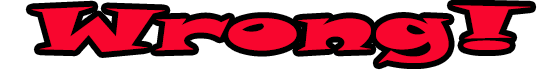
<style>
.page{position:relative;width:559px;height:78px;background:#ffffff}
.page>*{position:absolute;margin:0}
.t1{font:60px "SnapITC-Regular";color:#f8062e;scale:2 1}
</style>
<div class="page">
<p class="t1" style="left:31px;top:5px;width:500px;height:59px">Wrong!</p>
</div>
